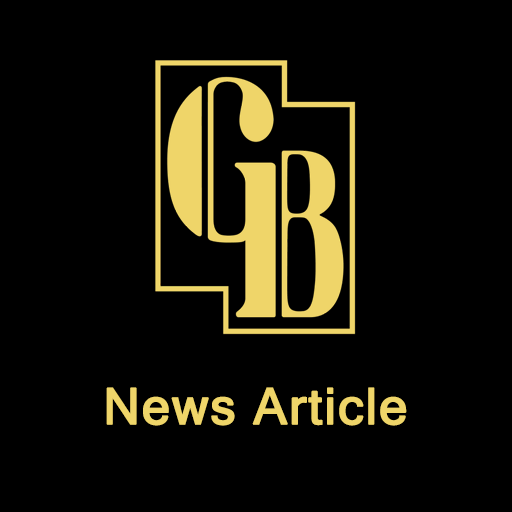
<style>
.page{position:relative;width:512px;height:512px;background:#000000}
.page>*{position:absolute;margin:0}
.t1{font:50px "MicrosoftSansSerif";letter-spacing:0.02em;color:#efd569;font-weight:bold}
</style>
<div class="page">
<p class="t1" style="left:106px;top:387px;width:301px;height:39px">News Article</p>
</div>
